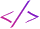
<style>
.page{position:relative;width:40px;height:29px;background:#ffffff}
.page>*{position:absolute;margin:0}
.t1{font:25.7px "Apple-Chancery"}
</style>
<div class="page">
<p class="t1" style="left:0px;top:0px;width:39px;height:28px">&lt;/&gt;</p>
</div>
